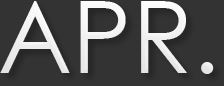
<style>
.page{position:relative;width:224px;height:86px;background:#333333}
.page>*{position:absolute;margin:0}
.t1{font:100px "CenturyGothic";color:#ffffff}
</style>
<div class="page">
<p class="t1" style="left:0px;top:1px;width:214px;height:73px">APR.</p>
</div>
